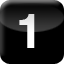
<style>
.page{position:relative;width:64px;height:64px;background:#000000}
.page>*{position:absolute;margin:0}
.t1{font:48px "Helvetica-Bold";color:#ffffff}
</style>
<div class="page">
<p class="t1" style="left:19px;top:14px;width:16px;height:34px">1</p>
</div>
